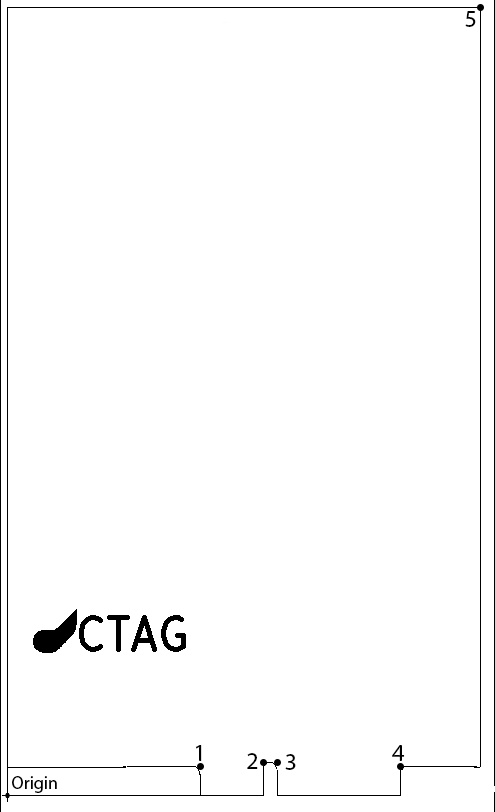
<style>
.page{position:relative;width:495px;height:812px;background:#ffffff}
.page>*{position:absolute;margin:0}
.t1{font:24px "MyriadPro-Regular";color:#000000}
.t2{font:18px "MyriadPro-Regular";color:#000000}
</style>
<div class="page">
<p class="t1" style="left:465px;top:11px;width:11px;height:16px">5</p>
<p class="t1" style="left:196px;top:745px;width:6px;height:16px">1</p>
<p class="t1" style="left:392px;top:745px;width:13px;height:16px">4</p>
<p class="t1" style="left:247px;top:753px;width:11px;height:16px">2</p>
<p class="t1" style="left:285px;top:754px;width:11px;height:16px">3</p>
<p class="t2" style="left:12px;top:776px;width:45px;height:17px">Origin</p>
</div>
